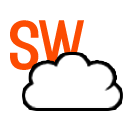
<style>
.page{position:relative;width:128px;height:128px;background:#ffffff}
.page>*{position:absolute;margin:0}
.t1{font:67.4px "OstrichSans-Black";letter-spacing:-0.04em;color:#fc4c02;scale:1.2 1}
.t2{font:67.4px "OstrichSans-Black";letter-spacing:-0.04em;color:#fc4c02}
</style>
<div class="page">
<p class="t1" style="left:10px;top:20px;width:74px;height:50px">S<span class="t2">W</span></p>
</div>
